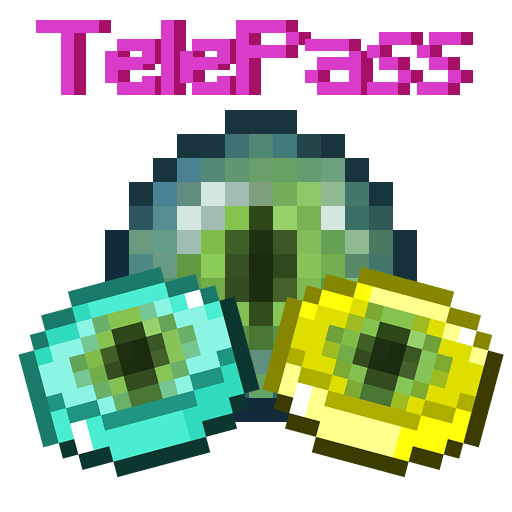
<style>
.page{position:relative;width:512px;height:512px;background:#ffffff}
.page>*{position:absolute;margin:0}
.t1{font:100px "Minecraft";color:#d83cc9}
.t2{font:100px "Minecraft"}
</style>
<div class="page">
<p class="t1" style="left:36px;top:20px;width:425px;height:75px">TelePass</p>
<p class="t2" style="left:48px;top:20px;width:425px;height:75px">TelePass</p>
</div>
